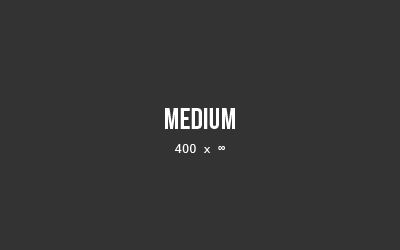
<style>
.page{position:relative;width:400px;height:250px;background:#333333}
.page>*{position:absolute;margin:0}
.t1{font:30px "BebasNeue";color:#ffffff}
.t2{font:12px "DroidSansMono";color:#ffffff}
</style>
<div class="page">
<p class="t1" style="left:165px;top:108px;width:70px;height:21px">Medium</p>
<p class="t2" style="left:175px;top:144px;width:50px;height:9px">400 x ∞</p>
</div>
